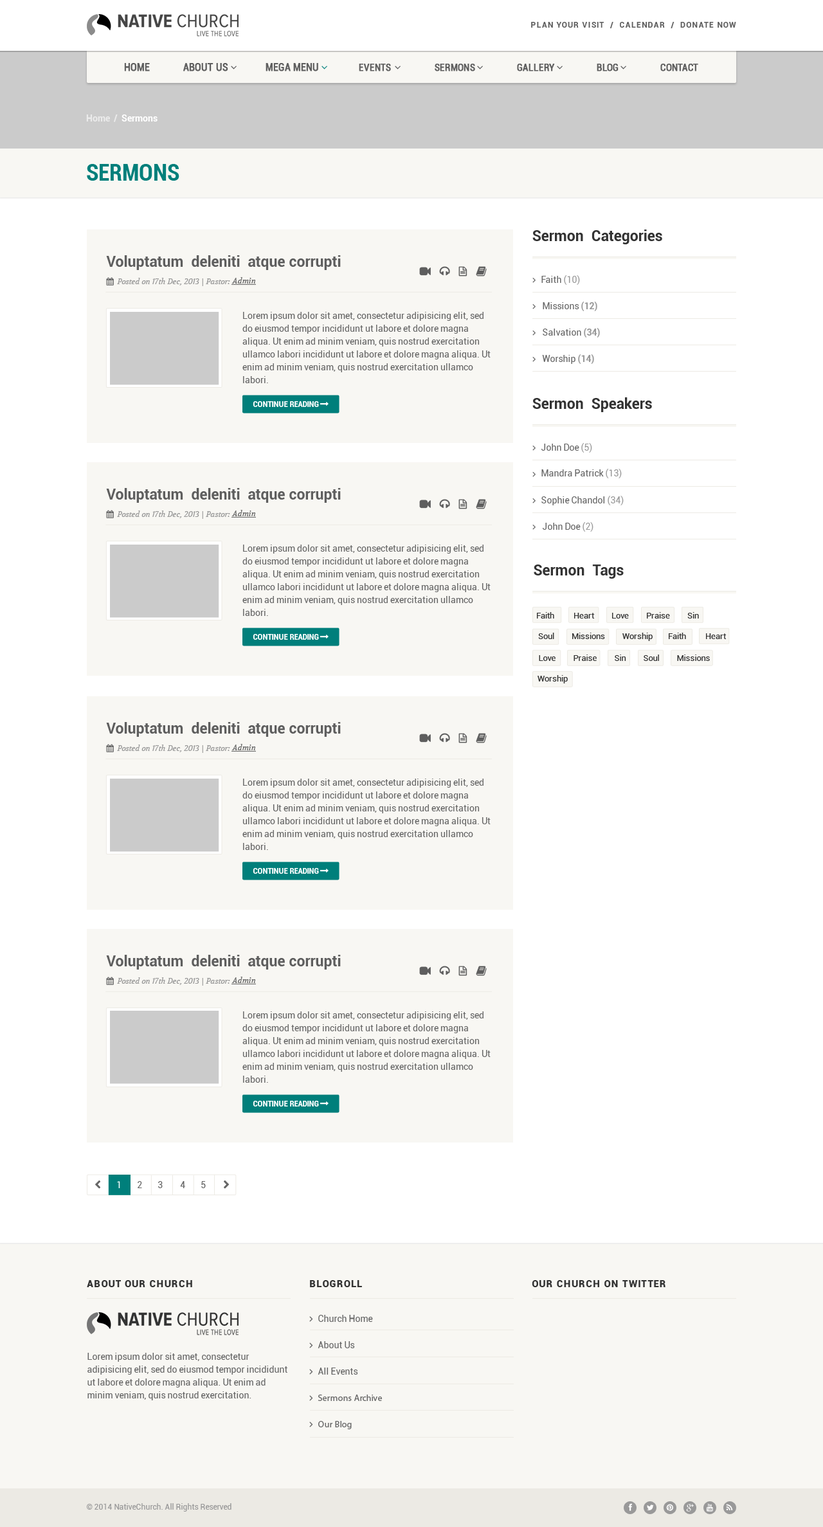
<style>
.page{position:relative;width:823px;height:1527px;background:#ffffff}
.page>*{position:absolute;margin:0}
.t1{font:7.7px "Roboto-Bold";letter-spacing:0.1em;color:#5e5e5e}
.t2{font:9px "Roboto-Bold";color:#ebebeb}
.t3{font:9px "Roboto-Bold";color:#ffffff}
.t4{font:23.1px "Roboto-BoldCondensed";color:#007f7b;text-transform:uppercase}
.t5{font:14.8px "Roboto-Bold";color:#333333}
.t6{font:14.8px "Roboto-Bold";color:#5e5e5e}
.t7{font:7.7px "Volkhov-Italic";color:#666666}
.t8{font:9px "Roboto-Regular";color:#666666}
.t9{font:9px "Roboto-Regular";color:#999999}
.t10{font:9px "Roboto-Bold";color:#999999}
.t11{font:9px/12.9px "Roboto-Regular";color:#666666}
.t12{font:8.4px/10.3px "Roboto-Regular";color:#333333}
.t13{font:8.4px "Roboto-Regular";color:#333333}
.t14{font:9.6px "Roboto-Black";letter-spacing:0.075em;color:#333333}
.t15{font:7.7px "Roboto-Regular";color:#999999}
</style>
<div class="page">
<p class="t1" style="left:531px;top:22px;width:205px;height:6px">PLAN YOUR VISIT  /  CALENDAR  /  DONATE NOW</p>
<p class="t2" style="left:86px;top:114px;width:72px;height:8px">Home  /  <span class="t3">Sermons</span></p>
<p class="t4" style="left:87px;top:164px;width:92px;height:17px">Sermons</p>
<p class="t5" style="left:532px;top:230px;width:130px;height:14px">Sermon  Categories</p>
<p class="t6" style="left:106px;top:255px;width:235px;height:15px">Voluptatum  deleniti  atque corrupti</p>
<p class="t7" style="left:231px;top:277px;width:25px;height:7px">Admin</p>
<p class="t8" style="left:541px;top:275px;width:39px;height:10px">Faith <span class="t9">(10)</span></p>
<p class="t8" style="left:543px;top:302px;width:54px;height:9px">Missions <span class="t10">(12)</span></p>
<p class="t11" style="left:242px;top:312px;width:249px;height:71px">Lorem ipsum dolor sit amet, consectetur adipisicing elit, sed do eiusmod tempor incididunt ut labore et dolore magna aliqua. Ut enim ad minim veniam, quis nostrud exercitation ullamco labori incididunt ut labore et dolore magna aliqua. Ut enim ad minim veniam, quis nostrud exercitation ullamco labori.</p>
<p class="t8" style="left:543px;top:328px;width:57px;height:10px">Salvation <span class="t10">(34)</span></p>
<p class="t8" style="left:542px;top:354px;width:52px;height:10px">Worship <span class="t10">(14)</span></p>
<p class="t5" style="left:532px;top:397px;width:120px;height:15px">Sermon  Speakers</p>
<p class="t8" style="left:541px;top:443px;width:51px;height:10px">John Doe <span class="t9">(5)</span></p>
<p class="t8" style="left:541px;top:469px;width:81px;height:9px">Mandra Patrick <span class="t9">(13)</span></p>
<p class="t6" style="left:106px;top:488px;width:235px;height:15px">Voluptatum  deleniti  atque corrupti</p>
<p class="t8" style="left:541px;top:496px;width:83px;height:9px">Sophie Chandol <span class="t9">(34)</span></p>
<p class="t7" style="left:231px;top:510px;width:25px;height:6px">Admin</p>
<p class="t8" style="left:543px;top:522px;width:50px;height:10px">John Doe <span class="t9">(2)</span></p>
<p class="t11" style="left:242px;top:544px;width:249px;height:72px">Lorem ipsum dolor sit amet, consectetur adipisicing elit, sed do eiusmod tempor incididunt ut labore et dolore magna aliqua. Ut enim ad minim veniam, quis nostrud exercitation ullamco labori incididunt ut labore et dolore magna aliqua. Ut enim ad minim veniam, quis nostrud exercitation ullamco labori.</p>
<p class="t5" style="left:534px;top:564px;width:90px;height:15px">Sermon  Tags</p>
<p class="t12" style="left:537px;top:612px;width:189px;height:29px">Faith          Heart         Love         Praise         Sin<br><br> Soul         Missions         Worship        Faith          Heart</p>
<p class="t13" style="left:539px;top:654px;width:171px;height:7px">Love         Praise         Sin         Soul         Missions</p>
<p class="t13" style="left:537px;top:675px;width:31px;height:8px">Worship</p>
<p class="t6" style="left:106px;top:722px;width:235px;height:15px">Voluptatum  deleniti  atque corrupti</p>
<p class="t7" style="left:231px;top:744px;width:25px;height:6px">Admin</p>
<p class="t11" style="left:242px;top:779px;width:249px;height:71px">Lorem ipsum dolor sit amet, consectetur adipisicing elit, sed do eiusmod tempor incididunt ut labore et dolore magna aliqua. Ut enim ad minim veniam, quis nostrud exercitation ullamco labori incididunt ut labore et dolore magna aliqua. Ut enim ad minim veniam, quis nostrud exercitation ullamco labori.</p>
<p class="t6" style="left:106px;top:955px;width:235px;height:14px">Voluptatum  deleniti  atque corrupti</p>
<p class="t7" style="left:231px;top:977px;width:25px;height:6px">Admin</p>
<p class="t11" style="left:242px;top:1011px;width:249px;height:72px">Lorem ipsum dolor sit amet, consectetur adipisicing elit, sed do eiusmod tempor incididunt ut labore et dolore magna aliqua. Ut enim ad minim veniam, quis nostrud exercitation ullamco labori incididunt ut labore et dolore magna aliqua. Ut enim ad minim veniam, quis nostrud exercitation ullamco labori.</p>
<p class="t14" style="left:87px;top:1280px;width:105px;height:7px">ABOUT OUR CHURCH</p>
<p class="t14" style="left:310px;top:1280px;width:52px;height:7px">BLOGROLL</p>
<p class="t14" style="left:532px;top:1280px;width:133px;height:7px">OUR CHURCH ON TWITTER</p>
<p class="t11" style="left:87px;top:1353px;width:200px;height:47px">Lorem ipsum dolor sit amet, consectetur adipisicing elit, sed do eiusmod tempor incididunt ut labore et dolore magna aliqua. Ut enim ad minim veniam, quis nostrud exercitation.</p>
<p class="t15" style="left:86px;top:1503px;width:145px;height:8px">© 2014 NativeChurch. All Rights Reserved</p>
</div>
